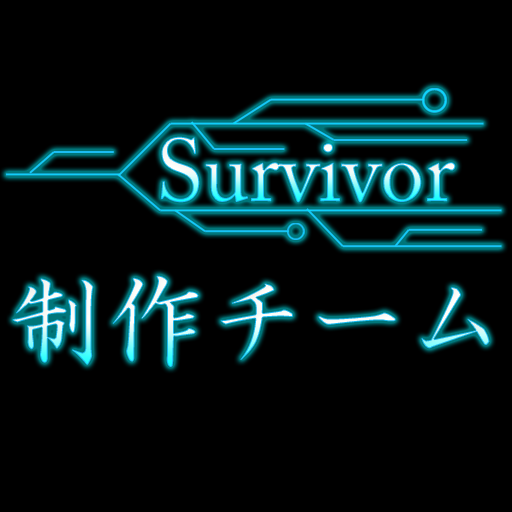
<style>
.page{position:relative;width:512px;height:512px;background:#000000}
.page>*{position:absolute;margin:0}
.t1{font:89.1px "ACaslonPro-Regular"}
.t2{font:99.7px "HGSeikaishotaiPRO"}
</style>
<div class="page">
<p class="t1" style="left:160px;top:136px;width:296px;height:67px">Survivor</p>
<p class="t2" style="left:12px;top:275px;width:478px;height:92px">制作チーム</p>
</div>
